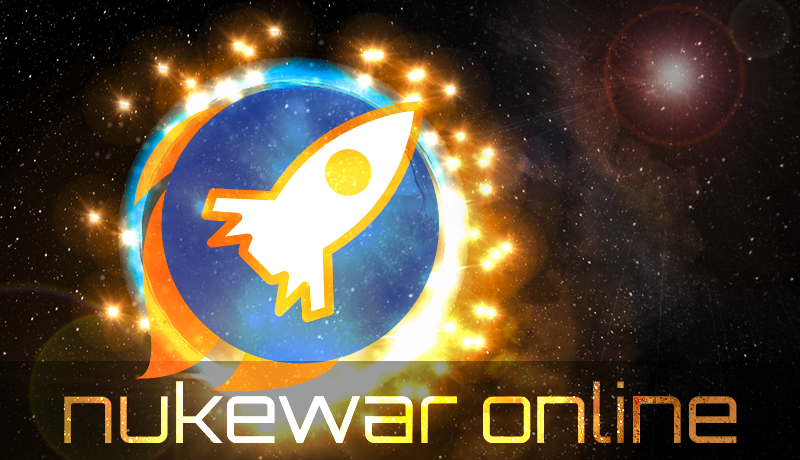
<style>
.page{position:relative;width:800px;height:460px}
.page>*{position:absolute;margin:0}
.t1{font:80px "Orbitron-Regular"}
.t2{font:80px "Orbitron-Regular";color:#ce823a}
</style>
<div class="page">
<p class="t1" style="left:64px;top:381px;width:672px;height:62px">nukewar online</p>
<p class="t1" style="left:64px;top:381px;width:672px;height:62px">nukewar online</p>
<p class="t1" style="left:64px;top:381px;width:672px;height:62px">nukewar online</p>
<p class="t2" style="left:633px;top:396px;width:104px;height:47px">ne</p>
</div>
